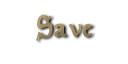
<style>
.page{position:relative;width:128px;height:64px;background:#ffffff}
.page>*{position:absolute;margin:0}
.t1{font:30px "Planewalker-Bold";letter-spacing:0.05em;color:#9e8a5f;scale:0.85 1}
</style>
<div class="page">
<p class="t1" style="left:36px;top:14px;width:57px;height:27px">Save</p>
</div>
